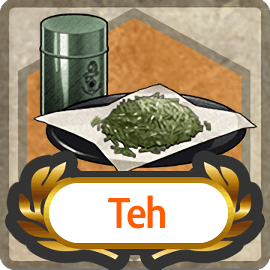
<style>
.page{position:relative;width:270px;height:270px}
.page>*{position:absolute;margin:0}
.t1{font:45px "AdobeClean-Bold";letter-spacing:-0.04em;color:#ff5d00;scale:0.9 1}
</style>
<div class="page">
<p class="t1" style="left:107px;top:195px;width:58px;height:34px">Teh</p>
</div>
